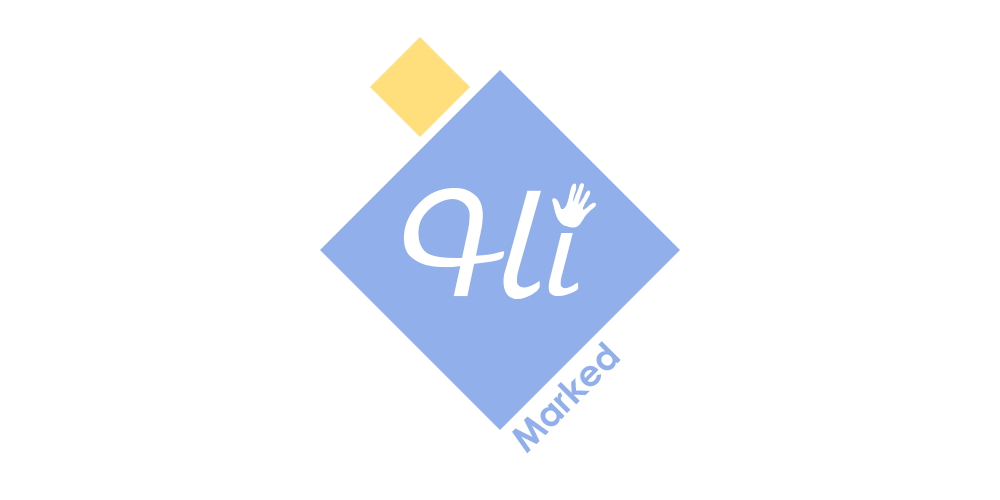
<style>
.page{position:relative;width:1000px;height:500px;background:#ffffff}
.page>*{position:absolute;margin:0}
.t1{font:150px "Arbat";color:#ffffff}
.t2{font:36px "CenturyGothic-Bold";color:#91afea}
</style>
<div class="page">
<p class="t1" style="left:403px;top:188px;width:178px;height:111px">Hi</p>
<p class="t2" style="left:512px;top:341px;width:109px;height:113px;rotate:-45deg">Marked</p>
</div>
